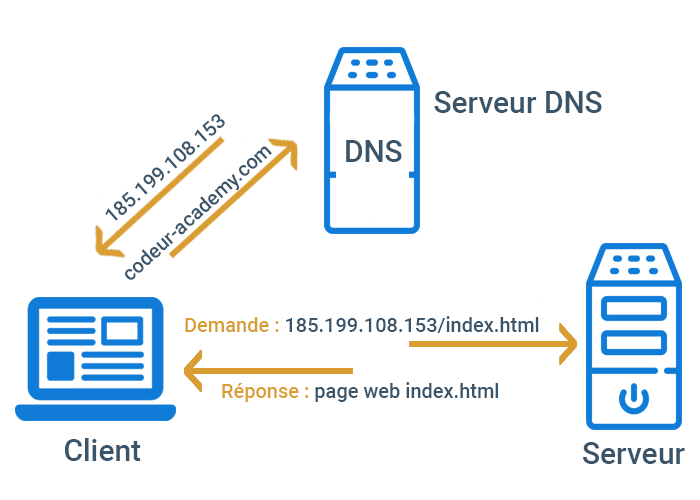
<style>
.page{position:relative;width:700px;height:500px;background:#ffffff}
.page>*{position:absolute;margin:0}
.t1{font:30px "Roboto-Medium";color:#3a556a}
.t2{font:20px "Roboto-Medium";color:#3a556a}
.t3{font:20px "Roboto-Medium";color:#da9d32}
</style>
<div class="page">
<p class="t1" style="left:434px;top:91px;width:168px;height:22px">Serveur DNS</p>
<p class="t2" style="left:105px;top:114px;width:120px;height:107px;rotate:-41deg">185.199.108.153</p>
<p class="t2" style="left:125px;top:146px;width:147px;height:134px;rotate:-42deg">codeur-academy.com</p>
<p class="t1" style="left:346px;top:140px;width:56px;height:22px">DNS</p>
<p class="t2" style="left:185px;top:316px;width:354px;height:17px"><span class="t3">Demande : </span>185.199.108.153/index.html</p>
<p class="t2" style="left:222px;top:382px;width:276px;height:20px"><span class="t3">Réponse : </span>page web index.html</p>
<p class="t1" style="left:65px;top:438px;width:76px;height:23px">Client</p>
<p class="t1" style="left:583px;top:442px;width:102px;height:22px">Serveur</p>
</div>
